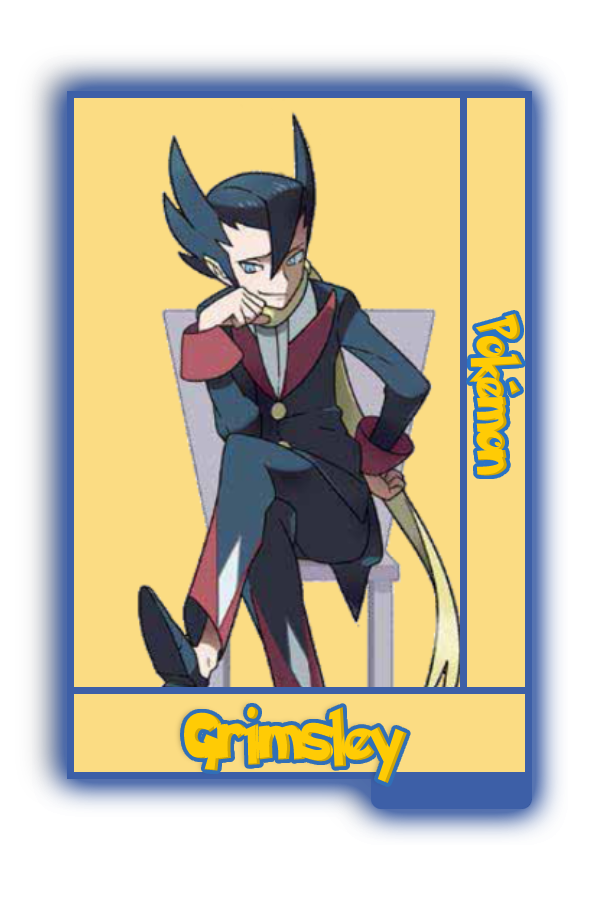
<style>
.page{position:relative;width:600px;height:900px;background:#fbdc83}
.page>*{position:absolute;margin:0}
.t1{font:48.8px "PokemonSolidNormal";color:#ffcb05;scale:0.8 1}
.t2{font:56.6px "PokemonSolidNormal";color:#ffcb05;scale:0.92 1}
</style>
<div class="page">
<p class="t1" style="left:469px;top:313px;width:54px;height:163px;rotate:90deg">Pokémon</p>
<p class="t2" style="left:184px;top:706px;width:223px;height:77px">Grimsley</p>
</div>
